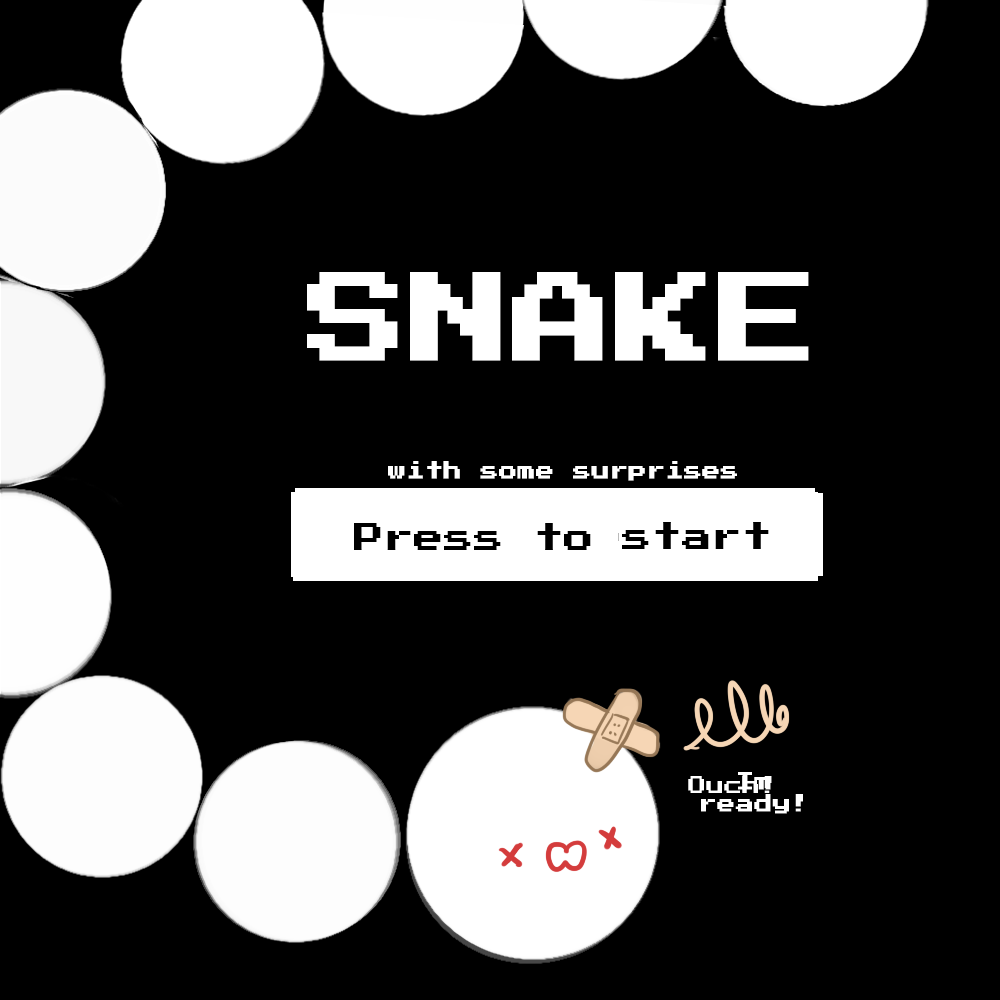
<style>
.page{position:relative;width:1000px;height:1000px;background:#000000}
.page>*{position:absolute;margin:0}
.t1{font:18px "PressStart2P-Regular";color:#ffffff;font-weight:bold}
.t2{font:0px "PressStart2P-Regular";color:#ffffff;font-weight:bold}
.t3{font:100px "PressStart2P-Regular";color:#ffffff;font-weight:bold}
.t4{font:72px "PressStart2P-Regular";color:#ffffff;font-weight:bold}
</style>
<div class="page">
<p class="t1" style="left:307px;top:272px;width:502px;height:209px;text-align:center"><span class="t2">Snake<br></span><span class="t3">SNAKE<br></span><span class="t4"><br></span>with some surprises</p>
<p class="t1" style="left:701px;top:772px;width:102px;height:42px;text-align:center">Im ready!</p>
</div>
